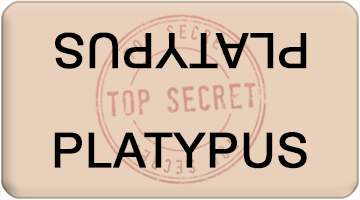
<style>
.page{position:relative;width:360px;height:200px;background:#e8d0bb}
.page>*{position:absolute;margin:0}
.t1{font:48px "ArialMT";color:#000000;font-weight:bold}
</style>
<div class="page">
<p class="t1" style="left:55px;top:32px;width:252px;height:37px;rotate:180deg">PLATYPUS</p>
<p class="t1" style="left:54px;top:132px;width:253px;height:37px">PLATYPUS</p>
</div>
